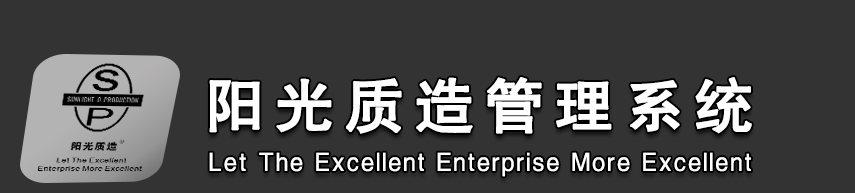
<style>
.page{position:relative;width:855px;height:193px;background:#333333}
.page>*{position:absolute;margin:0}
.t1{font:58.8px "FZHTJW--GB1-0";letter-spacing:0.15em;color:#ffffff;font-weight:bold}
.t2{font:25.4px "FZHTJW--GB1-0";letter-spacing:0.15em;color:#ffffff;scale:0.94 1}
</style>
<div class="page">
<p class="t1" style="left:209px;top:77px;width:543px;height:57px">阳光质造管理系统</p>
<p class="t2" style="left:209px;top:152px;width:542px;height:25px">Let The Excellent Enterprise More Excellent</p>
</div>
